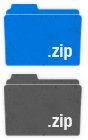
<style>
.page{position:relative;width:88px;height:140px}
.page>*{position:absolute;margin:0}
.t1{font:18px "HelveticaNeue-CondensedBold";color:#e6f1fb}
.t2{font:18px "HelveticaNeue-CondensedBold";color:#ffffff}
</style>
<div class="page">
<p class="t1" style="left:48px;top:44px;width:24px;height:16px">.zip</p>
<p class="t2" style="left:48px;top:114px;width:24px;height:16px;opacity:0.9">.zip</p>
</div>
